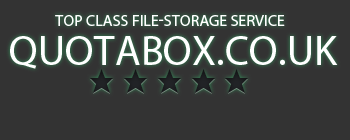
<style>
.page{position:relative;width:350px;height:140px;background:#333333}
.page>*{position:absolute;margin:0}
.t1{font:16px "MyriadPro-Regular";color:#ffffff;text-transform:uppercase}
.t2{font:42px "MyriadPro-Regular";color:#ffffff;text-transform:uppercase}
</style>
<div class="page">
<p class="t1" style="left:55px;top:15px;width:230px;height:11px">top class file-storage service</p>
<p class="t2" style="left:10px;top:36px;width:328px;height:33px">QUOTABOX.CO.UK</p>
</div>
